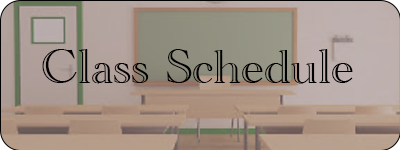
<style>
.page{position:relative;width:400px;height:150px}
.page>*{position:absolute;margin:0}
.t1{font:50px "AcademyEngravedLetPlain";color:#000000}
</style>
<div class="page">
<p class="t1" style="left:42px;top:49px;width:311px;height:35px">Class Schedule</p>
</div>
